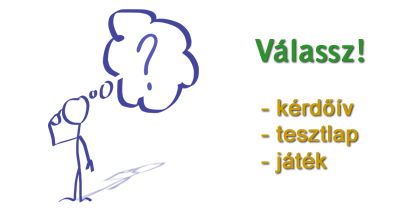
<style>
.page{position:relative;width:420px;height:210px;background:#ffffff}
.page>*{position:absolute;margin:0}
.t1{font:30px "BellGothicStd-Bold";letter-spacing:0.01em;color:#299429;font-weight:bold}
.t2{font:22px "ArialMT";letter-spacing:0.01em;color:#cc9900;font-weight:bold}
</style>
<div class="page">
<p class="t1" style="left:255px;top:38px;width:109px;height:24px">Válassz!</p>
<p class="t2" style="left:261px;top:99px;width:97px;height:74px">- kérdőív<br>- tesztlap<br>- játék</p>
</div>
